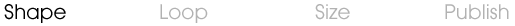
<style>
.page{position:relative;width:515px;height:26px;background:#ffffff}
.page>*{position:absolute;margin:0}
.t1{font:20px "Atlanta-Book";color:#000000}
.t2{font:20px "Atlanta-Book";color:#b2b2b2}
</style>
<div class="page">
<p class="t1" style="left:4px;top:4px;width:62px;height:19px">Shape</p>
<p class="t2" style="left:160px;top:4px;width:48px;height:19px">Loop</p>
<p class="t2" style="left:315px;top:4px;width:35px;height:16px">Size</p>
<p class="t2" style="left:445px;top:4px;width:64px;height:16px">Publish</p>
</div>
